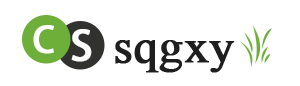
<style>
.page{position:relative;width:300px;height:86px;background:#ffffff}
.page>*{position:absolute;margin:0}
.t1{font:36px "AdobeHeitiStd-Regular";color:#fcfdfc;font-weight:bold}
.t2{font:41px "AdobeHeitiStd-Regular";color:#fcfdfc;font-weight:bold}
.t3{font:48px "TimesNewRomanPSMT";color:#1e1e1e;font-weight:bold}
</style>
<div class="page">
<p class="t1" style="left:33px;top:25px;width:21px;height:29px">C</p>
<p class="t2" style="left:71px;top:29px;width:21px;height:33px">S</p>
<p class="t3" style="left:115px;top:40px;width:120px;height:33px">sqgxy</p>
</div>
